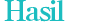
<style>
.page{position:relative;width:90px;height:22px;background:#ffffff}
.page>*{position:absolute;margin:0}
.t1{font:28px "RyuminPro-ExBold";letter-spacing:-0.08em;color:#1cbdc0}
</style>
<div class="page">
<p class="t1" style="left:4px;top:0px;width:61px;height:22px">Hasil</p>
</div>
